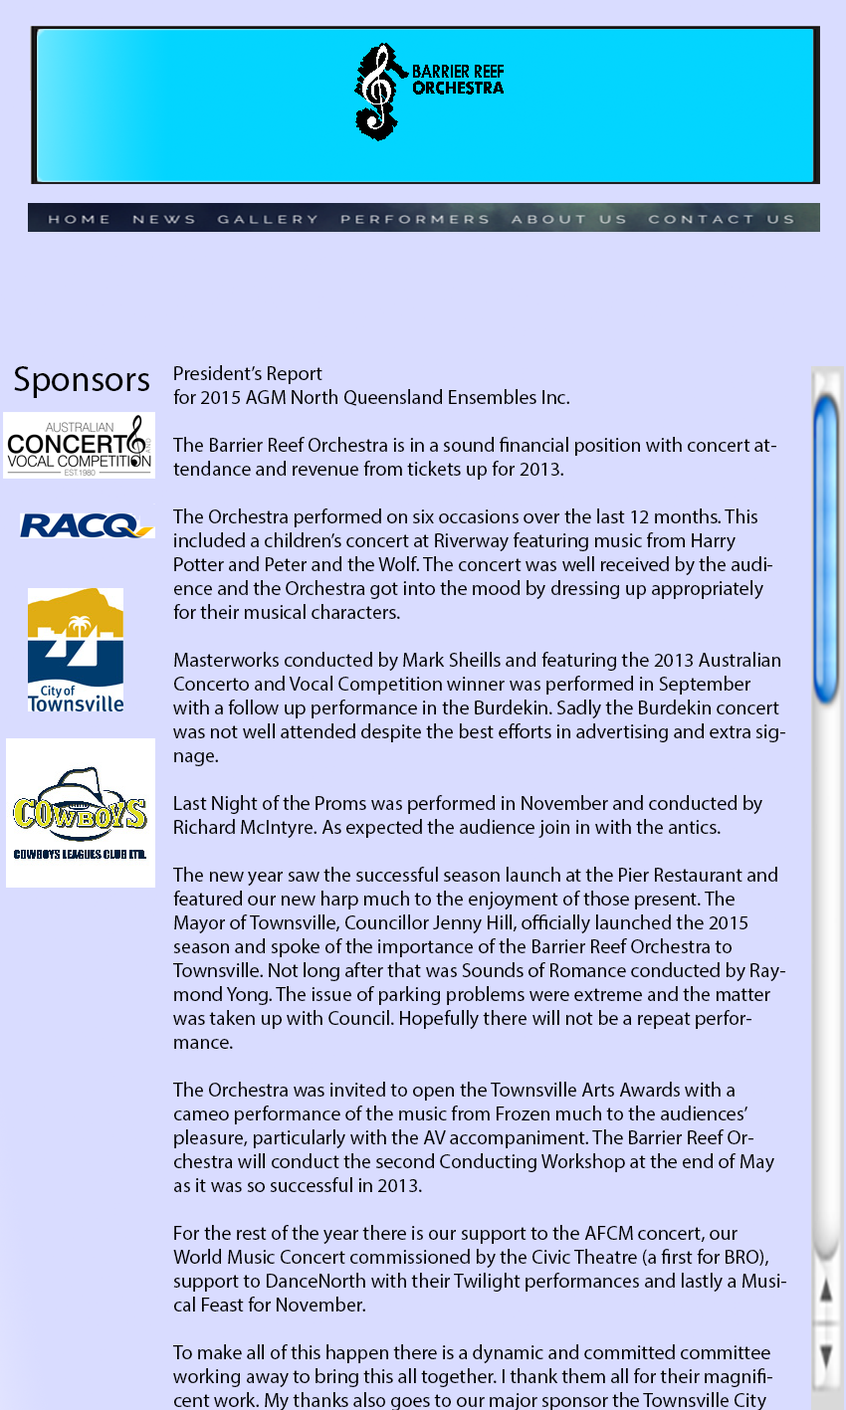
<style>
.page{position:relative;width:846px;height:1410px;background:#d9dcff}
.page>*{position:absolute;margin:0}
.t1{font:19.9px "MyriadPro-Regular";color:#000000}
.t2{font:35.8px "MyriadPro-Regular";color:#000000}
</style>
<div class="page">
<p class="t1" style="left:173px;top:365px;width:613px;height:1046px">President’s Report <br>for 2015 AGM North Queensland Ensembles Inc. <br><br>The Barrier Reef Orchestra is in a sound financial position with concert attendance and revenue from tickets up for 2013. <br><br>The Orchestra performed on six occasions over the last 12 months. This included a children’s concert at Riverway featuring music from Harry Potter and Peter and the Wolf. The concert was well received by the audience and the Orchestra got into the mood by dressing up appropriately for their musical characters. <br><br>Masterworks conducted by Mark Sheills and featuring the 2013 Australian Concerto and Vocal Competition winner was performed in September with a follow up performance in the Burdekin. Sadly the Burdekin concert was not well attended despite the best efforts in advertising and extra signage. <br><br>Last Night of the Proms was performed in November and conducted by Richard McIntyre. As expected the audience join in with the antics. <br><br>The new year saw the successful season launch at the Pier Restaurant and featured our new harp much to the enjoyment of those present. The Mayor of Townsville, Councillor Jenny Hill, officially launched the 2015 season and spoke of the importance of the Barrier Reef Orchestra to Townsville. Not long after that was Sounds of Romance conducted by Raymond Yong. The issue of parking problems were extreme and the matter was taken up with Council. Hopefully there will not be a repeat performance. <br><br>The Orchestra was invited to open the Townsville Arts Awards with a cameo performance of the music from Frozen much to the audiences’ pleasure, particularly with the AV accompaniment. The Barrier Reef Orchestra will conduct the second Conducting Workshop at the end of May as it was so successful in 2013. <br><br>For the rest of the year there is our support to the AFCM concert, our World Music Concert commissioned by the Civic Theatre (a first for BRO), support to DanceNorth with their Twilight performances and lastly a Musical Feast for November. <br><br>To make all of this happen there is a dynamic and committed committee working away to bring this all together. I thank them all for their magnificent work. My thanks also goes to our major sponsor the Townsville City Council, our generous benefactors and to the Orchestra Manager Sally Frewen-Lord who has found time to run a survey for the musicians to get some feedback on how we do business. Thank you all. <br><br>Jeff Nielsen has reworked our website and taken great steps forward in producing a functional and relevant website. Jeff is handing it over to the next person to continue the good work, Thanks Jeff. I will be introducing life members later as a way of marking the Barrier Reef Orchestra 15th Anniversary. <br><br>The Barrier Reef Orchestra has taken the opportunity to be directly involved with the development of the TPAC proposal. I see it as necessary support to all of the arts organisations to promote the need for more performance spaces in Townsville and I would urge you all to visit the website and help spread the word. Simon has injected himself into this project with the usual eye for detail while keeping appraised of the macro developments in Townsville. Thanks Simon for your energy and incisive views on this important project. <br><br>The 15th anniversary year of BRO has been marked by several approaches to the Orchestra to perform in support of other arts organisations. I take this as a sign of confidence others see in our Orchestra and acceptance of the Barrier Reef Orchestra as Townsville’s resident cultural cornerstone to orchestral music. A fitting milestone for the 15th year of the Barrier Reef Orchestra.</p>
<p class="t2" style="left:14px;top:366px;width:135px;height:32px">Sponsors</p>
</div>
